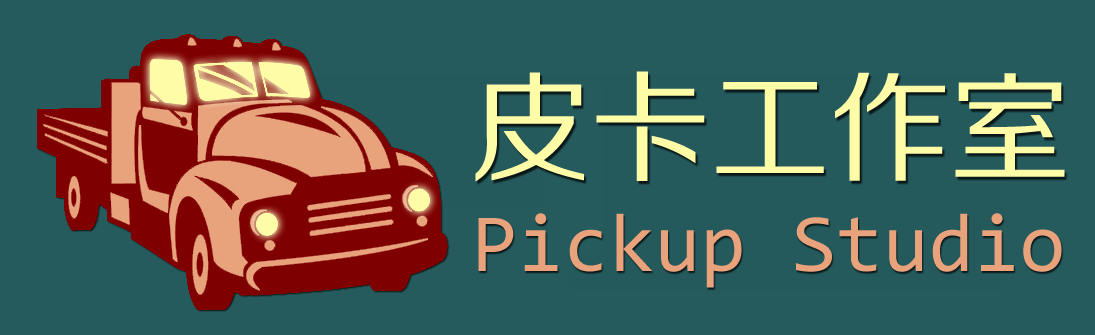
<style>
.page{position:relative;width:1095px;height:335px;background:#255b5d}
.page>*{position:absolute;margin:0}
.t1{font:120px "FZZHJW--GB1-0";color:#fffca8}
.t2{font:83px "Consolas";color:#e7a07b}
</style>
<div class="page">
<p class="t1" style="left:475px;top:71px;width:590px;height:111px">皮卡工作室</p>
<p class="t2" style="left:478px;top:213px;width:584px;height:75px">Pickup Studio</p>
</div>
